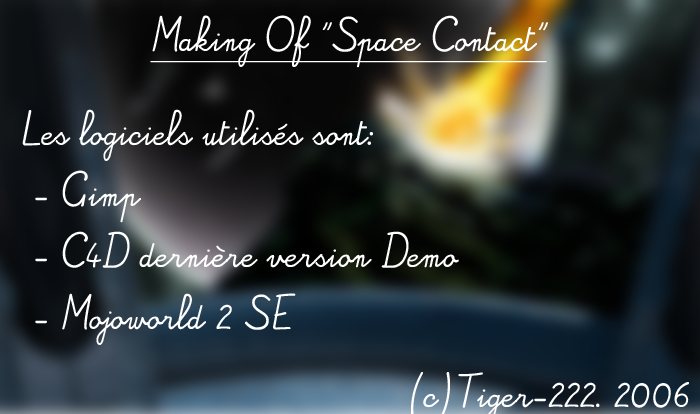
<style>
.page{position:relative;width:700px;height:414px}
.page>*{position:absolute;margin:0}
.t1{font:23.9px/20.5px "Alamain";color:#ffffff;text-decoration:underline}
.t2{font:23.9px/20.5px "Alamain";color:#ffffff}
</style>
<div class="page">
<p class="t1" style="left:150px;top:15px;width:398px;height:53px">Making Of "Space Contact"</p>
<p class="t2" style="left:22px;top:109px;width:437px;height:236px">Les logiciels utilisés sont:<br><br><br> - Gimp<br><br><br> - C4D dernière version Demo<br><br><br> - Mojoworld 2 SE</p>
</div>
